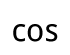
<style>
.page{position:relative;width:70px;height:55px;background:#ffffff}
.page>*{position:absolute;margin:0}
.t1{font:31.8px "DroidSans";color:#000000}
</style>
<div class="page">
<p class="t1" style="left:13px;top:24px;width:45px;height:18px">cos</p>
</div>
